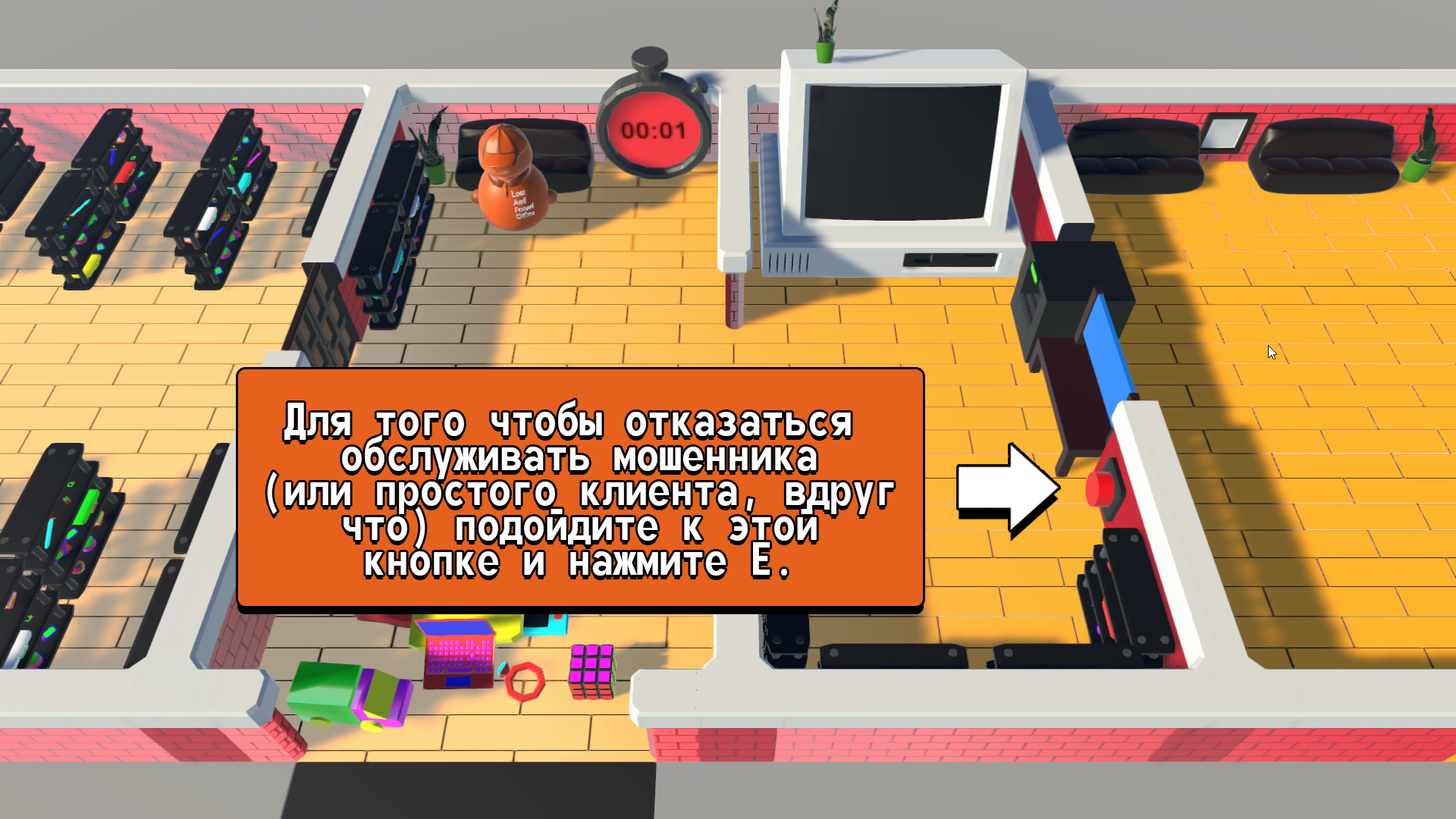
<style>
.page{position:relative;width:1456px;height:819px}
.page>*{position:absolute;margin:0}
.t1{font:56.9px/34.8px "MonofontoRUSBYMelman-Regular";color:#fdfefd}
</style>
<div class="page">
<p class="t1" style="left:267px;top:400px;width:627px;height:176px;text-align:center">Для того чтобы отказаться<br> обслуживать мошенника<br> (или простого клиента, вдруг<br> что) подойдите к этой<br> кнопке и нажмите Е.</p>
</div>
